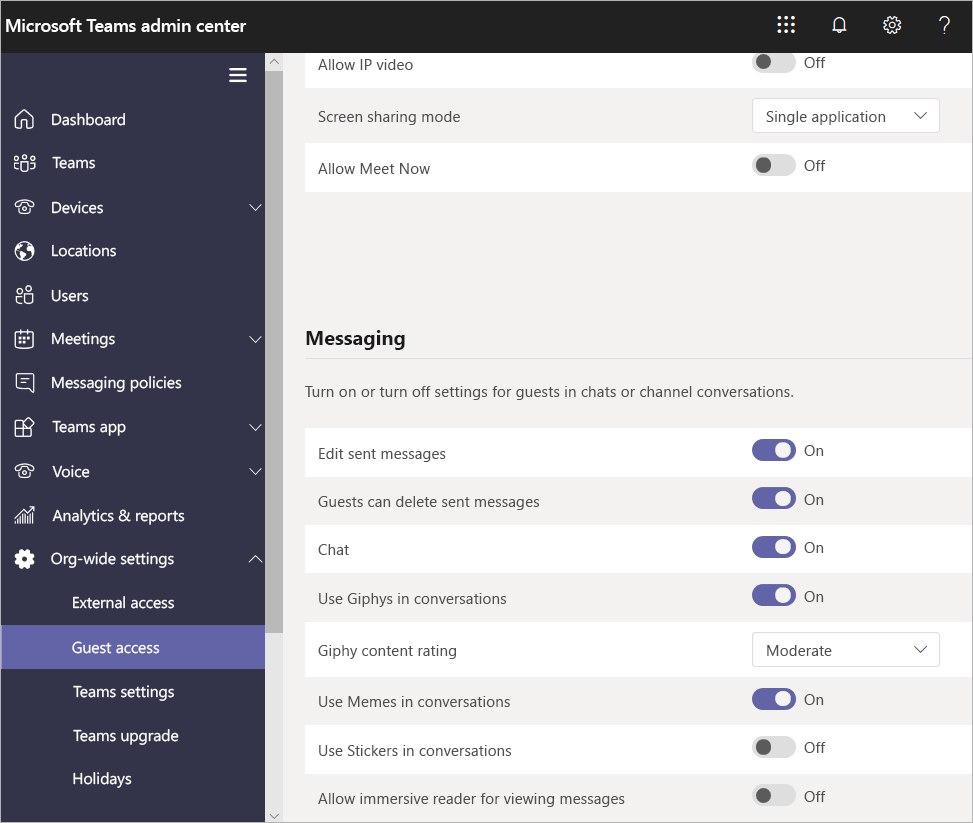
<style>
.page{position:relative;width:973px;height:823px;background:#f3f2f1}
.page>*{position:absolute;margin:0}
.t1{font:17.6px "SegoeUI-Semibold";color:#ffffff}
.t2{font:15.3px "SegoeUI";color:#505050}
.t3{font:15.6px "SegoeUI";color:#ffffff}
.t4{font:20px "SegoeUI-Bold";color:#1b1b1b}
.t5{font:15.5px "SegoeUI";color:#505050}
</style>
<div class="page">
<p class="t1" style="left:6px;top:18px;width:241px;height:14px">Microsoft Teams admin center</p>
<p class="t2" style="left:318px;top:59px;width:95px;height:11px">Allow IP video</p>
<p class="t2" style="left:804px;top:57px;width:22px;height:11px">Off</p>
<p class="t3" style="left:52px;top:113px;width:73px;height:13px">Dashboard</p>
<p class="t2" style="left:318px;top:111px;width:142px;height:14px">Screen sharing mode</p>
<p class="t2" style="left:766px;top:111px;width:120px;height:14px">Single application</p>
<p class="t3" style="left:52px;top:156px;width:43px;height:13px">Teams</p>
<p class="t2" style="left:804px;top:160px;width:22px;height:11px">Off</p>
<p class="t2" style="left:318px;top:163px;width:112px;height:11px">Allow Meet Now</p>
<p class="t3" style="left:52px;top:201px;width:51px;height:13px">Devices</p>
<p class="t3" style="left:52px;top:244px;width:64px;height:13px">Locations</p>
<p class="t3" style="left:51px;top:289px;width:38px;height:13px">Users</p>
<p class="t3" style="left:52px;top:332px;width:63px;height:16px">Meetings</p>
<p class="t4" style="left:306px;top:330px;width:99px;height:20px">Messaging</p>
<p class="t3" style="left:52px;top:376px;width:130px;height:16px">Messaging policies</p>
<p class="t5" style="left:305px;top:386px;width:489px;height:14px">Turn on or turn off settings for guests in chats or channel conversations.</p>
<p class="t3" style="left:52px;top:420px;width:74px;height:16px">Teams app</p>
<p class="t2" style="left:319px;top:448px;width:127px;height:14px">Edit sent messages</p>
<p class="t2" style="left:804px;top:445px;width:20px;height:11px">On</p>
<p class="t3" style="left:52px;top:465px;width:38px;height:13px">Voice</p>
<p class="t2" style="left:318px;top:496px;width:222px;height:14px">Guests can delete sent messages</p>
<p class="t2" style="left:804px;top:494px;width:20px;height:11px">On</p>
<p class="t3" style="left:52px;top:509px;width:133px;height:16px">Analytics &amp; reports</p>
<p class="t2" style="left:318px;top:544px;width:31px;height:11px">Chat</p>
<p class="t2" style="left:804px;top:542px;width:20px;height:11px">On</p>
<p class="t3" style="left:51px;top:552px;width:123px;height:16px">Org-wide settings</p>
<p class="t2" style="left:319px;top:593px;width:188px;height:14px">Use Giphys in conversations</p>
<p class="t2" style="left:804px;top:591px;width:20px;height:11px">On</p>
<p class="t3" style="left:73px;top:596px;width:101px;height:13px">External access</p>
<p class="t3" style="left:72px;top:641px;width:88px;height:13px">Guest access</p>
<p class="t2" style="left:318px;top:645px;width:138px;height:14px">Giphy content rating</p>
<p class="t2" style="left:767px;top:645px;width:65px;height:11px">Moderate</p>
<p class="t3" style="left:73px;top:685px;width:101px;height:16px">Teams settings</p>
<p class="t2" style="left:319px;top:696px;width:191px;height:11px">Use Memes in conversations</p>
<p class="t2" style="left:804px;top:694px;width:20px;height:11px">On</p>
<p class="t3" style="left:73px;top:729px;width:106px;height:16px">Teams upgrade</p>
<p class="t2" style="left:319px;top:745px;width:193px;height:11px">Use Stickers in conversations</p>
<p class="t2" style="left:804px;top:742px;width:22px;height:11px">Off</p>
<p class="t3" style="left:73px;top:772px;width:59px;height:16px">Holidays</p>
<p class="t2" style="left:318px;top:793px;width:307px;height:14px">Allow immersive reader for viewing messages</p>
<p class="t2" style="left:804px;top:791px;width:22px;height:11px">Off</p>
</div>
